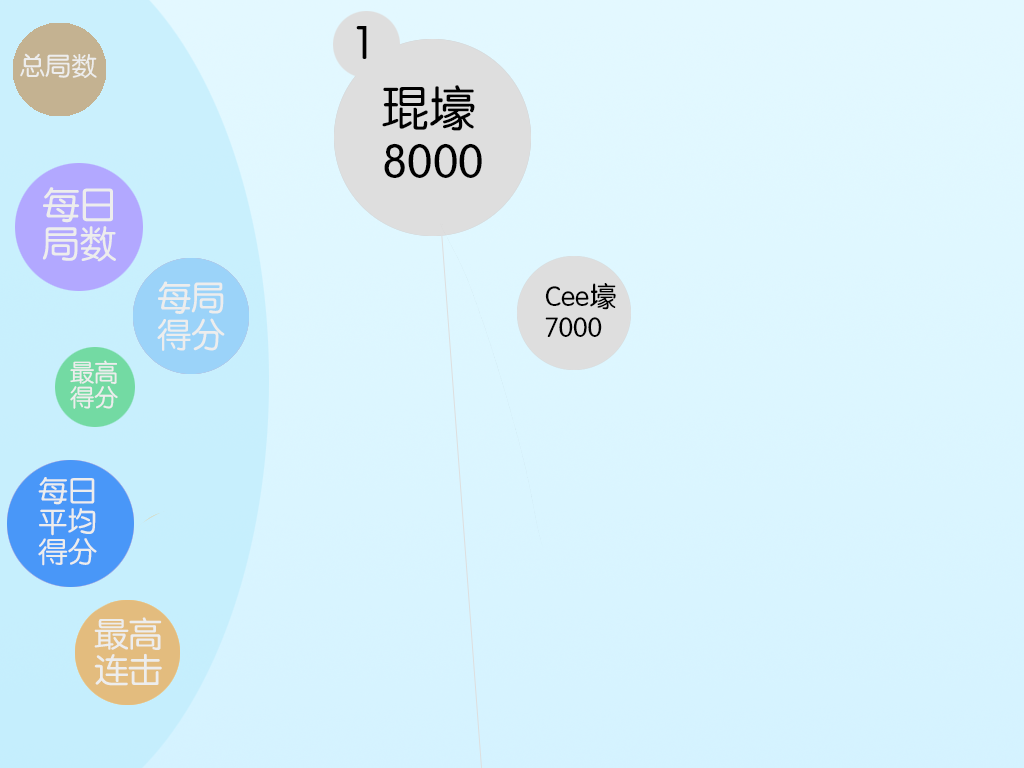
<style>
.page{position:relative;width:1024px;height:768px}
.page>*{position:absolute;margin:0}
.t1{font:46.5px "FZY3JW--GB1-0";color:#000000}
.t2{font:25.5px "FZY3JW--GB1-0";color:#ededed}
.t3{font:47.5px/52.8px "FZY3JW--GB1-0";color:#000000}
.t4{font:37.3px/39.1px "FZY3JW--GB1-0";color:#ededed}
.t5{font:34.5px/36.1px "FZY3JW--GB1-0";color:#ededed}
.t6{font:27.5px/30.6px "FZY3JW--GB1-0";color:#000000}
.t7{font:24.2px/25.4px "FZY3JW--GB1-0";color:#ededed}
.t8{font:29.1px/30.5px "FZY3JW--GB1-0";color:#ededed}
.t9{font:34px/35.7px "FZY3JW--GB1-0";color:#ededed}
</style>
<div class="page">
<p class="t1" style="left:356px;top:26px;width:11px;height:33px">1</p>
<p class="t2" style="left:20px;top:53px;width:77px;height:25px">总局数</p>
<p class="t3" style="left:382px;top:85px;width:100px;height:93px">琨壕<br>8000</p>
<p class="t4" style="left:42px;top:187px;width:74px;height:75px">每日<br>局数</p>
<p class="t5" style="left:157px;top:281px;width:68px;height:70px">每局<br>得分</p>
<p class="t6" style="left:545px;top:283px;width:71px;height:54px">Cee壕<br>7000</p>
<p class="t7" style="left:70px;top:360px;width:48px;height:49px">最高<br>得分</p>
<p class="t8" style="left:38px;top:477px;width:59px;height:89px">每日<br>平均<br>得分</p>
<p class="t9" style="left:94px;top:617px;width:68px;height:69px">最高<br>连击</p>
</div>
